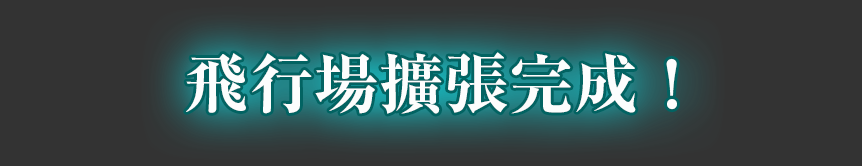
<style>
.page{position:relative;width:862px;height:166px;background:#333333}
.page>*{position:absolute;margin:0}
.t1{font:65px "RyuminPr6N-ExBold";color:#fcfdfd}
</style>
<div class="page">
<p class="t1" style="left:186px;top:52px;width:491px;height:62px">飛行場擴張完成！</p>
</div>
